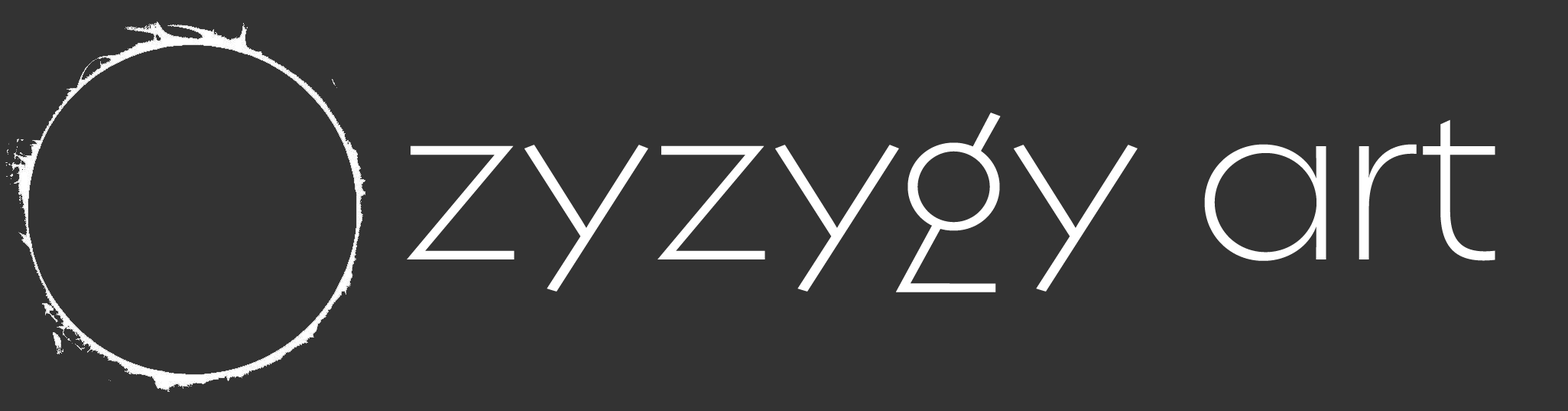
<style>
.page{position:relative;width:1568px;height:411px;background:#333333}
.page>*{position:absolute;margin:0}
.t1{font:224.5px "RegulatorNova-Light";color:#ffffff}
</style>
<div class="page">
<p class="t1" style="left:407px;top:112px;width:1088px;height:180px">zyzygy art</p>
</div>
